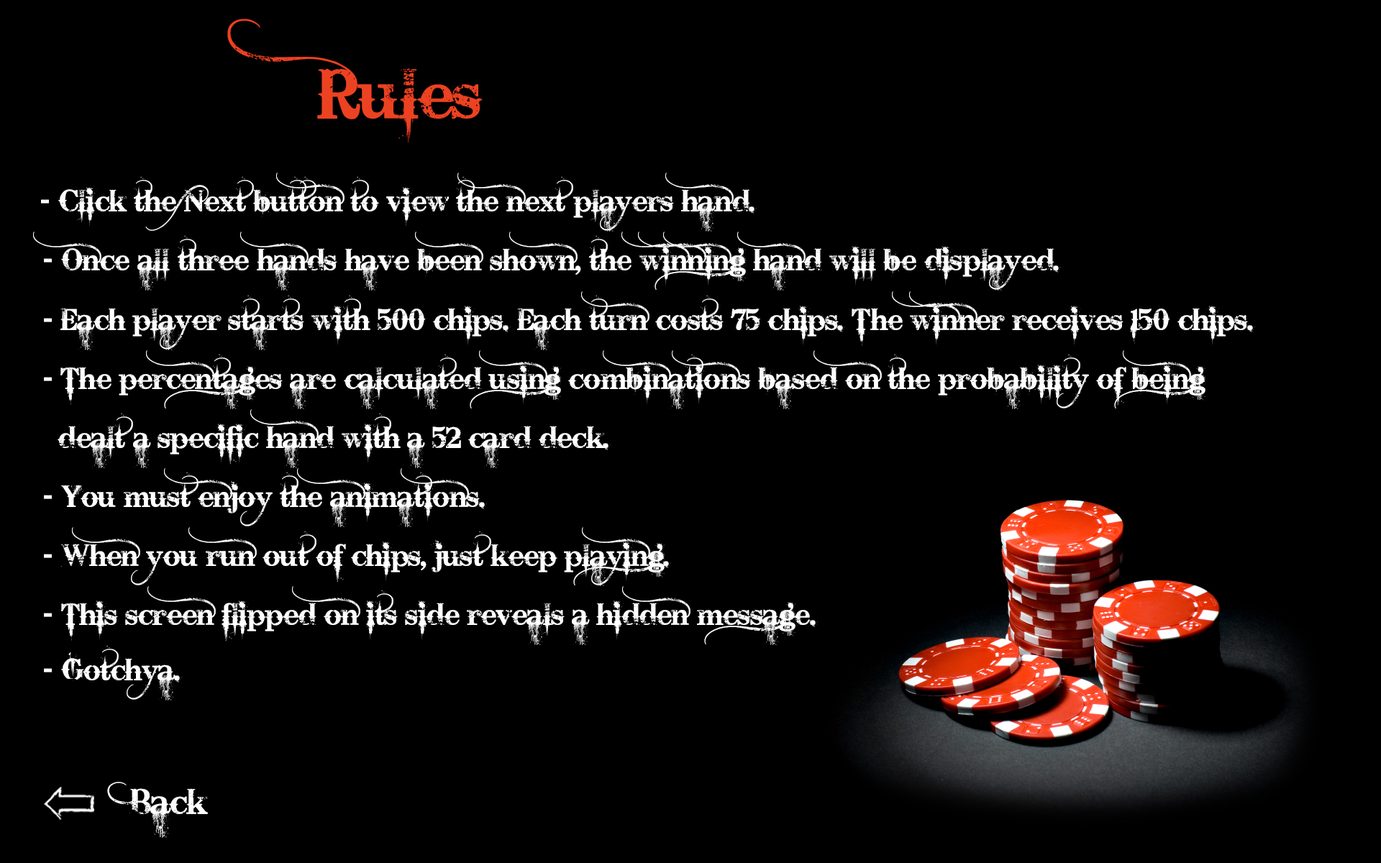
<style>
.page{position:relative;width:1381px;height:863px;background:#000000}
.page>*{position:absolute;margin:0}
.t1{font:68.9px/107.9px "BleedingCowboys";color:#ec4222}
.t2{font:30px/107.9px "BleedingCowboys";color:#ffffff}
.t3{font:35.1px "BleedingCowboys";color:#ffffff}
</style>
<div class="page">
<p class="t1" style="left:227px;top:19px;width:256px;height:124px;text-align:center">Rules</p>
<p class="t2" style="left:41px;top:173px;width:716px;height:59px;text-align:center">- Click the Next button to view the next players hand.</p>
<p class="t2" style="left:33px;top:232px;width:1028px;height:59px;text-align:center">- Once all three hands have been shown, the winning hand will be displayed.</p>
<p class="t2" style="left:44px;top:291px;width:1211px;height:59px;text-align:center">- Each player starts with 500 chips. Each turn costs 75 chips. The winner receives 150 chips.</p>
<p class="t2" style="left:44px;top:350px;width:1162px;height:59px;text-align:center">- The percentages are calculated using combinations based on the probability of being</p>
<p class="t2" style="left:58px;top:409px;width:553px;height:59px;text-align:center">dealt a specific hand with a 52 card deck.</p>
<p class="t2" style="left:44px;top:468px;width:443px;height:59px;text-align:center">- You must enjoy the animations.</p>
<p class="t2" style="left:44px;top:527px;width:627px;height:59px;text-align:center">- When you run out of chips, just keep playing.</p>
<p class="t2" style="left:44px;top:586px;width:774px;height:59px;text-align:center">- This screen flipped on its side reveals a hidden message.</p>
<p class="t2" style="left:44px;top:645px;width:138px;height:56px;text-align:center">- Gotchya.</p>
<p class="t3" style="left:107px;top:782px;width:101px;height:56px">Back</p>
</div>
